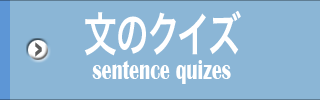
<style>
.page{position:relative;width:320px;height:100px;background:#8bb6d6}
.page>*{position:absolute;margin:0}
.t1{font:47.4px "HiraKakuPro-W6";color:#ffffff;scale:0.7 1}
.t2{font:28.4px "BritannicBold";color:#ffffff;scale:0.7 1}
</style>
<div class="page">
<p class="t1" style="left:84px;top:10px;width:157px;height:46px">文のクイズ</p>
<p class="t2" style="left:92px;top:60px;width:139px;height:24px">sentence quizes</p>
</div>
